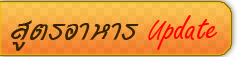
<style>
.page{position:relative;width:245px;height:57px}
.page>*{position:absolute;margin:0}
.t1{font:42px "DSEFreeJack";letter-spacing:0.005em;color:#382400}
.t2{font:42px "DSEFreeJack";letter-spacing:0.005em;color:#ff0000}
</style>
<div class="page">
<p class="t1" style="left:11px;top:15px;width:206px;height:36px">สูตรอาหาร <span class="t2">Update</span></p>
</div>
